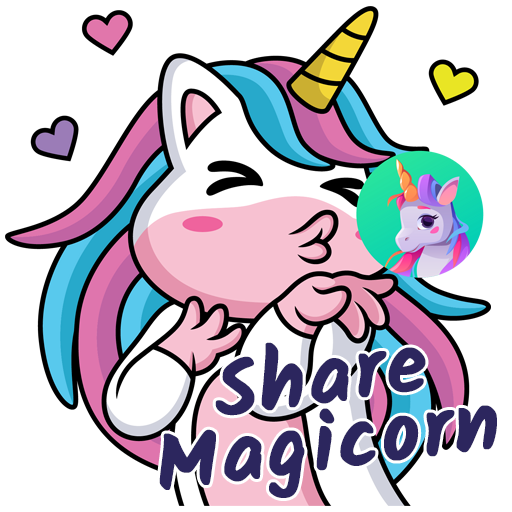
<style>
.page{position:relative;width:512px;height:512px;background:#ffffff}
.page>*{position:absolute;margin:0}
.t1{font:83.3px/66.7px "Kalam-Bold";letter-spacing:0.025em;color:#2c265e;font-weight:bold}
</style>
<div class="page">
<p class="t1" style="left:159px;top:342px;width:338px;height:156px;text-align:center;rotate:-7deg">Share<br>Magicorn</p>
</div>
